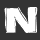
<style>
.page{position:relative;width:40px;height:40px;background:#333333}
.page>*{position:absolute;margin:0}
.t1{font:36px "ARDARLING";color:#ffffff;scale:1.24 1}
</style>
<div class="page">
<p class="t1" style="left:4px;top:7px;width:34px;height:26px">N</p>
</div>
